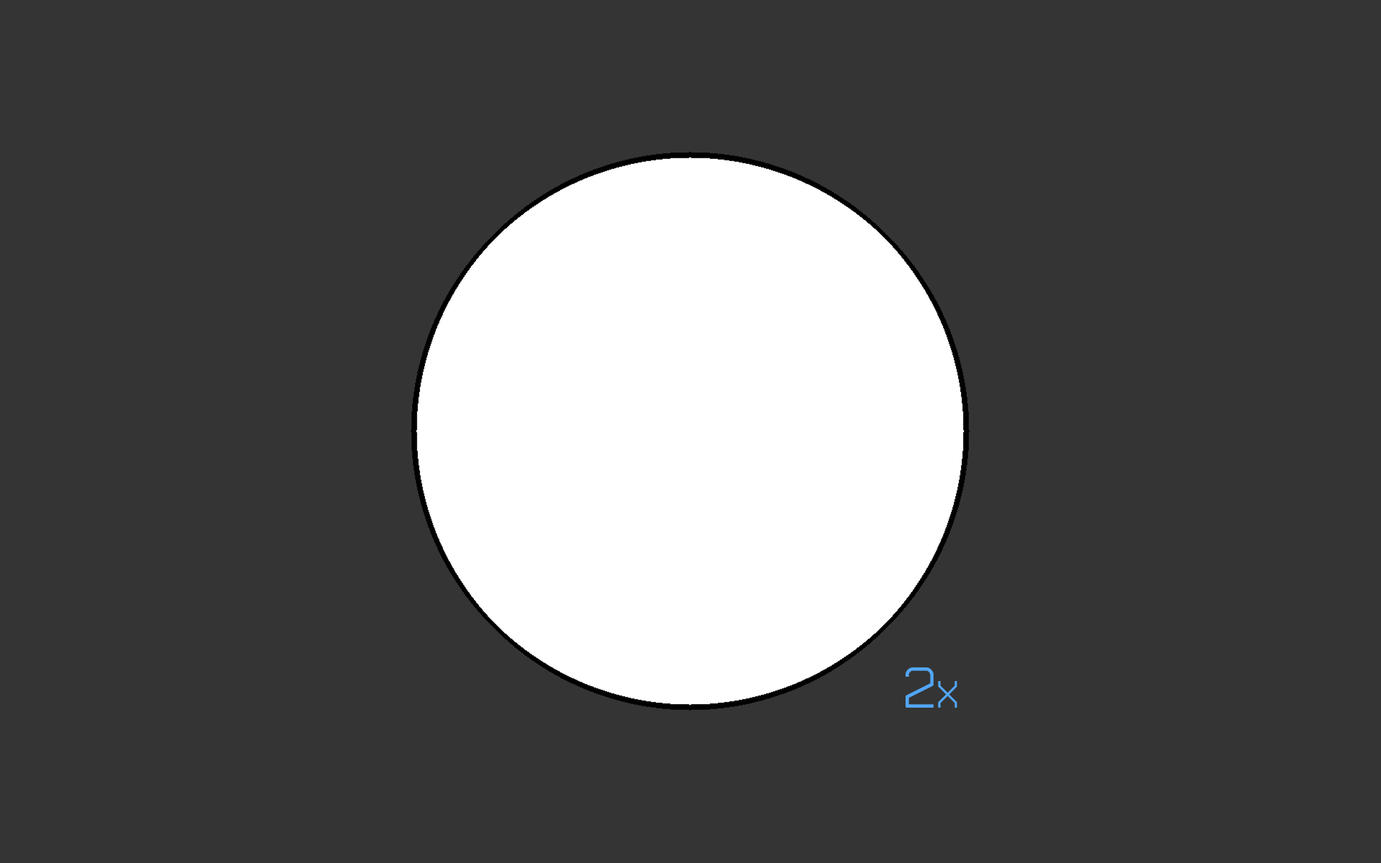
<style>
.page{position:relative;width:1381px;height:863px;background:#343434}
.page>*{position:absolute;margin:0}
.t1{font:57.6px "Arame-Thin";color:#51a6f8}
.t2{font:38.1px "Arame-Thin";color:#51a6f8}
</style>
<div class="page">
<p class="t1" style="left:906px;top:668px;width:52px;height:40px">2<span class="t2">x</span></p>
</div>
